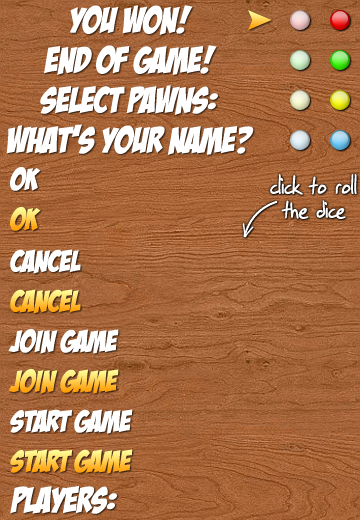
<style>
.page{position:relative;width:360px;height:520px}
.page>*{position:absolute;margin:0}
.t1{font:36px/40px "BadaBoomBB";color:#ffffff}
.t2{font:30px "BadaBoomBB";color:#ffffff}
.t3{font:30px/24px "SFGrungeSans";color:#ffffff}
.t4{font:30px "BadaBoomBB"}
.t5{font:36px "BadaBoomBB";color:#ffffff}
</style>
<div class="page">
<p class="t1" style="left:6px;top:5px;width:248px;height:150px;text-align:center">YOU WON!<br>END OF GAME!<br>SELECT PAWNS:<br>WHAT’s YOUR NAME?</p>
<p class="t2" style="left:10px;top:167px;width:31px;height:24px">OK</p>
<p class="t3" style="left:270px;top:174px;width:87px;height:45px;text-align:center">click to roll<br>the dice</p>
<p class="t4" style="left:10px;top:207px;width:31px;height:24px">OK</p>
<p class="t2" style="left:10px;top:249px;width:71px;height:25px">CANCEL</p>
<p class="t4" style="left:10px;top:289px;width:71px;height:25px">CANCEL</p>
<p class="t2" style="left:8px;top:329px;width:111px;height:25px">JOIN GAME</p>
<p class="t4" style="left:8px;top:369px;width:111px;height:25px">JOIN GAME</p>
<p class="t2" style="left:10px;top:409px;width:123px;height:25px">START GAME</p>
<p class="t4" style="left:10px;top:449px;width:123px;height:25px">START GAME</p>
<p class="t5" style="left:10px;top:486px;width:107px;height:28px">PLAYERS:</p>
</div>
